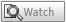
<style>
.page{position:relative;width:66px;height:22px}
.page>*{position:absolute;margin:0}
.t1{font:11.2px "Tahoma";letter-spacing:0.1em;color:#8d8d8d;scale:0.86 1}
</style>
<div class="page">
<p class="t1" style="left:23px;top:7px;width:31px;height:9px">Watch</p>
</div>
